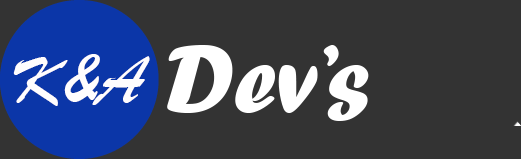
<style>
.page{position:relative;width:521px;height:159px;background:#333333}
.page>*{position:absolute;margin:0}
.t1{font:72.4px "BrushScriptMT";color:#fffdfe}
.t2{font:100.2px "ForteMT";color:#ffffff}
</style>
<div class="page">
<p class="t1" style="left:13px;top:54px;width:137px;height:52px">K&amp;A</p>
<p class="t2" style="left:167px;top:45px;width:202px;height:76px">Dev’s</p>
</div>
